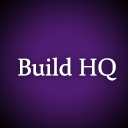
<style>
.page{position:relative;width:128px;height:128px}
.page>*{position:absolute;margin:0}
.t1{font:24px "Constantia";color:#ffffff}
</style>
<div class="page">
<p class="t1" style="left:18px;top:57px;width:99px;height:24px">Build HQ</p>
</div>
